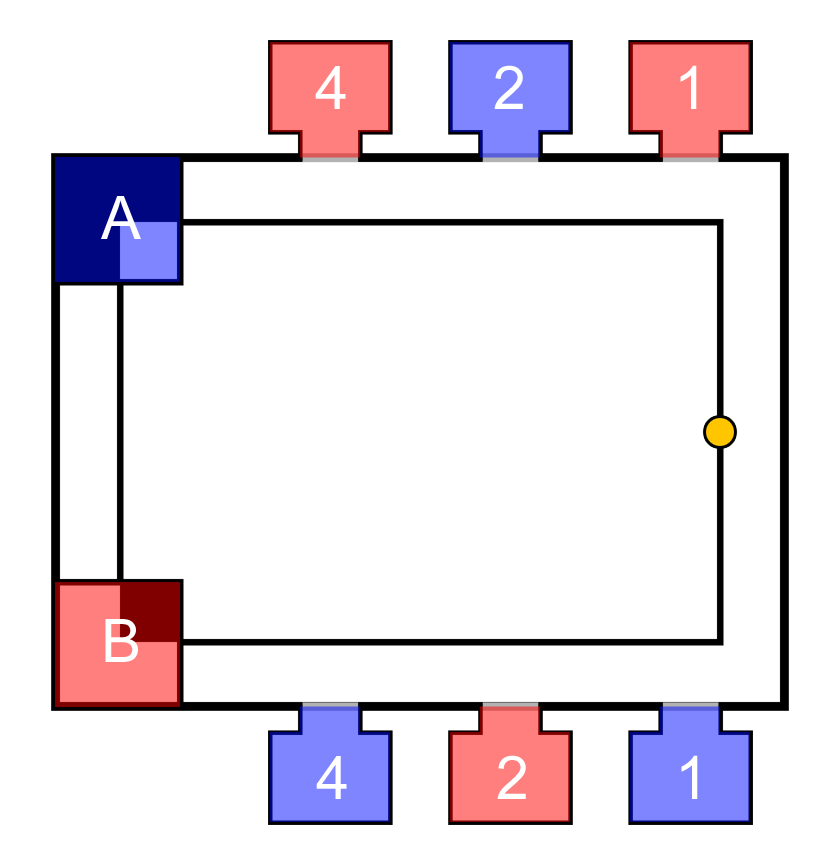
<style>
.page{position:relative;width:840px;height:862px;background:#ffffff}
.page>*{position:absolute;margin:0}
.t1{font:60px "ArialMT";letter-spacing:0.025em;color:#ffffff}
</style>
<div class="page">
<p class="t1" style="left:494px;top:65px;width:29px;height:44px">2</p>
<p class="t1" style="left:680px;top:65px;width:17px;height:44px">1</p>
<p class="t1" style="left:315px;top:66px;width:31px;height:43px">4</p>
<p class="t1" style="left:101px;top:196px;width:40px;height:43px">A</p>
<p class="t1" style="left:105px;top:619px;width:33px;height:43px">B</p>
<p class="t1" style="left:316px;top:756px;width:31px;height:43px">4</p>
<p class="t1" style="left:497px;top:755px;width:29px;height:44px">2</p>
<p class="t1" style="left:681px;top:755px;width:17px;height:44px">1</p>
</div>
